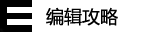
<style>
.page{position:relative;width:160px;height:32px;background:#ffffff}
.page>*{position:absolute;margin:0}
.t1{font:18px "MicrosoftYaHei";color:#000000}
</style>
<div class="page">
<p class="t1" style="left:46px;top:7px;width:72px;height:19px">编辑攻略</p>
</div>
